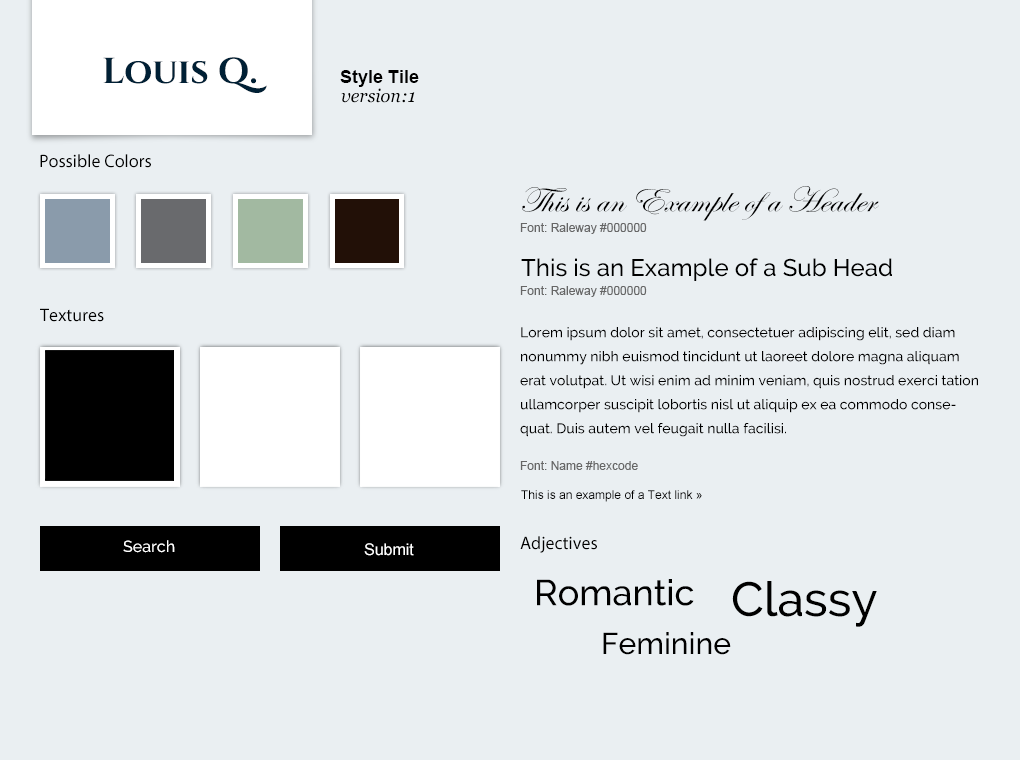
<style>
.page{position:relative;width:1020px;height:760px;background:#eaeff2}
.page>*{position:absolute;margin:0}
.t1{font:36px "Cinzel-Bold";color:#002035}
.t2{font:18px "Arial-BoldMT";color:#000000}
.t3{font:18px "Georgia-Italic";color:#000000}
.t4{font:18px "MyriadPro-Regular";color:#000000}
.t5{font:36px "EdwardianScriptITC";color:#000000;scale:1.07 1}
.t6{font:12px "ArialMT";color:#666666}
.t7{font:24px "Raleway-Medium";color:#000000}
.t8{font:14px/24px "Raleway-Medium";color:#000000}
.t9{font:12px "ArialMT";color:#000000}
.t10{font:16px "Raleway-Medium";color:#ffffff}
.t11{font:16px "ArialMT";color:#ffffff}
.t12{font:36px "Raleway-Medium";color:#000000}
.t13{font:48px "Raleway-Medium";color:#000000}
.t14{font:30px "Raleway-Medium";color:#000000}
</style>
<div class="page">
<p class="t1" style="left:103px;top:57px;width:164px;height:36px">Louis Q.</p>
<p class="t2" style="left:340px;top:70px;width:79px;height:17px">Style Tile</p>
<p class="t3" style="left:341px;top:88px;width:74px;height:15px">version:1</p>
<p class="t4" style="left:40px;top:154px;width:111px;height:14px">Possible Colors</p>
<p class="t5" style="left:522px;top:186px;width:357px;height:35px">This is an Example of a Header</p>
<p class="t6" style="left:520px;top:223px;width:127px;height:11px">Font: Raleway #000000</p>
<p class="t7" style="left:521px;top:258px;width:371px;height:23px">This is an Example of a Sub Head</p>
<p class="t6" style="left:520px;top:286px;width:127px;height:11px">Font: Raleway #000000</p>
<p class="t4" style="left:40px;top:308px;width:64px;height:14px">Textures</p>
<p class="t8" style="left:520px;top:327px;width:458px;height:110px">Lorem ipsum dolor sit amet, consectetuer adipiscing elit, sed diam nonummy nibh euismod tincidunt ut laoreet dolore magna aliquam erat volutpat. Ut wisi enim ad minim veniam, quis nostrud exerci tation ullamcorper suscipit lobortis nisl ut aliquip ex ea commodo consequat. Duis autem vel feugait nulla facilisi.</p>
<p class="t6" style="left:520px;top:461px;width:118px;height:9px">Font: Name #hexcode</p>
<p class="t9" style="left:521px;top:490px;width:181px;height:12px">This is an example of a Text link »</p>
<p class="t10" style="left:123px;top:540px;width:52px;height:13px">Search</p>
<p class="t11" style="left:364px;top:543px;width:50px;height:13px">Submit</p>
<p class="t4" style="left:520px;top:536px;width:77px;height:17px">Adjectives</p>
<p class="t12" style="left:537px;top:579px;width:157px;height:27px">Romantic</p>
<p class="t13" style="left:732px;top:581px;width:145px;height:46px">Classy</p>
<p class="t14" style="left:603px;top:632px;width:128px;height:23px">Feminine</p>
</div>
